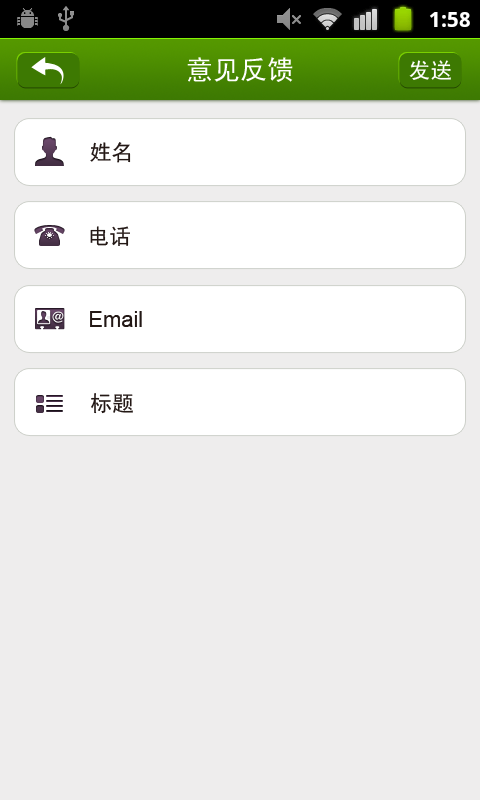
<style>
.page{position:relative;width:480px;height:800px;background:#eeeded}
.page>*{position:absolute;margin:0}
.t1{font:27px "SimHei";color:#ffffff}
.t2{font:22px "SimHei";color:#ffffff}
.t3{font:22px "SimHei";color:#231815}
.t4{font:22px "ArialMT";color:#231815}
</style>
<div class="page">
<p class="t1" style="left:187px;top:57px;width:106px;height:25px">意见反馈</p>
<p class="t2" style="left:409px;top:60px;width:42px;height:20px">发送</p>
<p class="t3" style="left:90px;top:142px;width:41px;height:21px">姓名</p>
<p class="t3" style="left:90px;top:226px;width:40px;height:20px">电话</p>
<p class="t4" style="left:90px;top:311px;width:52px;height:16px">Email</p>
<p class="t3" style="left:91px;top:393px;width:42px;height:21px">标题</p>
</div>
